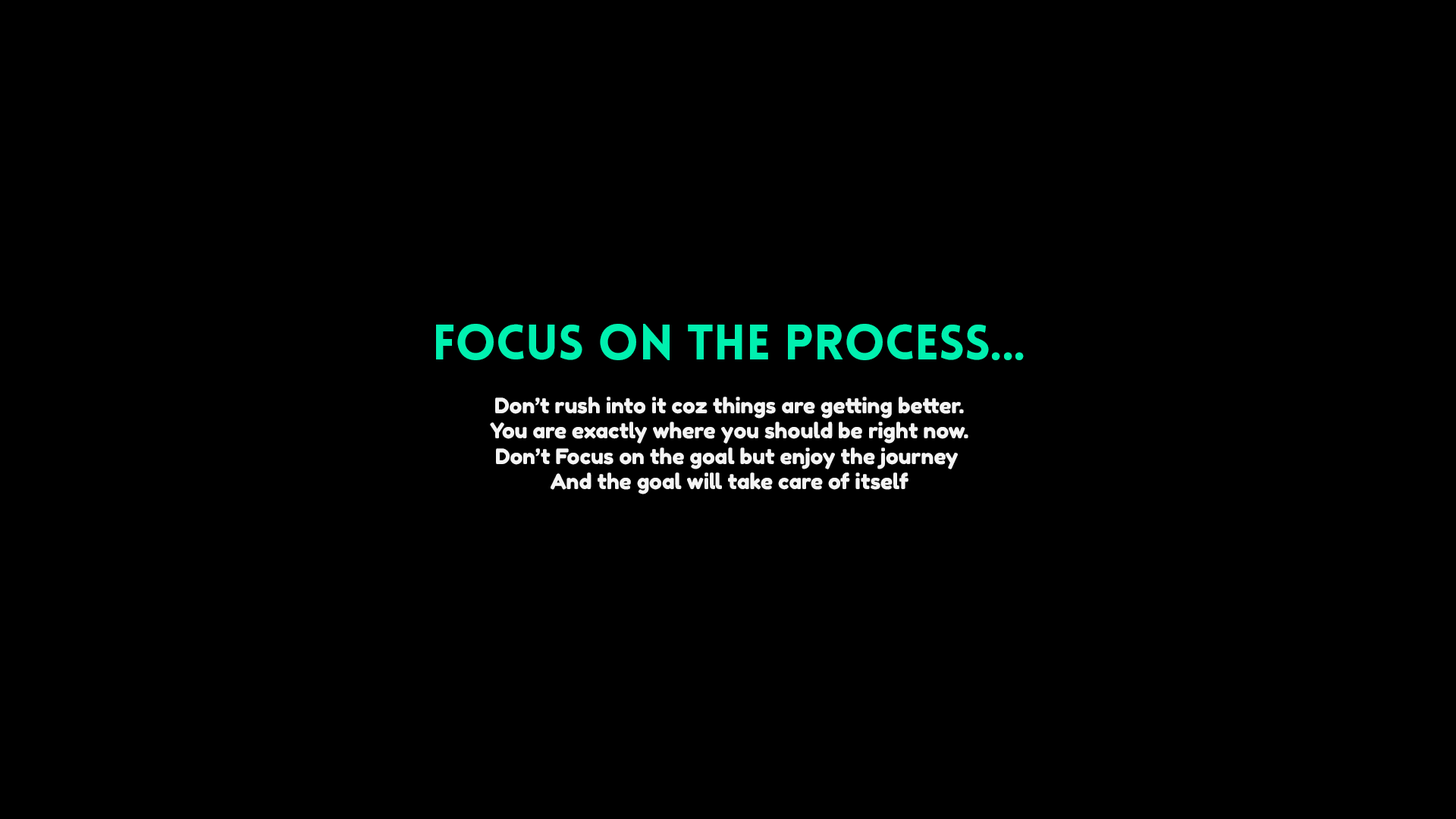
<style>
.page{position:relative;width:1456px;height:819px;background:#000000}
.page>*{position:absolute;margin:0}
.t1{font:48.7px "LoveloBlack";color:#00f0af}
.t2{font:21.2px "FredokaOne-Regular";color:#f4f4f4}
</style>
<div class="page">
<p class="t1" style="left:436px;top:324px;width:588px;height:36px">FOCUS ON THE PROCESS...</p>
<p class="t2" style="left:490px;top:397px;width:478px;height:97px;text-align:center">Don’t rush into it coz things are getting better.<br>You are exactly where you should be right now.<br>Don’t Focus on the goal but enjoy the journey <br>And the goal will take care of itself</p>
</div>
